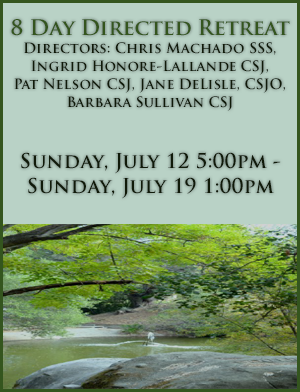
<style>
.page{position:relative;width:300px;height:392px;background:#b9d2c6}
.page>*{position:absolute;margin:0}
.t1{font:14px/18px "TrajanPro-Bold";color:#101a09}
.t2{font:21px/24px "TrajanPro-Bold";color:#34551e}
.t3{font:20px/25px "TrajanPro-Bold";color:#101a09}
</style>
<div class="page">
<p class="t1" style="left:11px;top:19px;width:279px;height:180px;text-align:center"><span class="t2">8 Day Directed Retreat<br></span>Directors: Chris Machado SSS, Ingrid Honore-Lallande CSJ, <br>Pat Nelson CSJ, Jane DeLisle, CSJO, Barbara Sullivan CSJ<br><br><br><span class="t3">Sunday, July 12 5:00pm - <br>Sunday, July 19 1:00pm</span></p>
</div>
